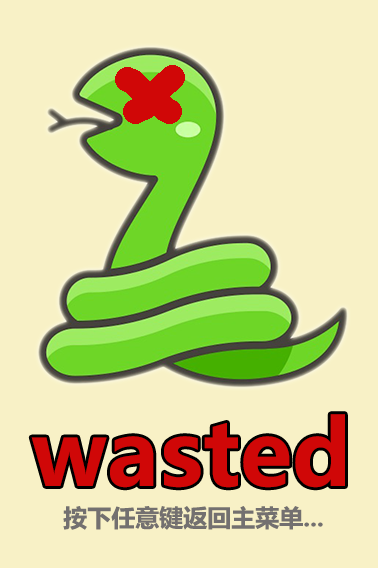
<style>
.page{position:relative;width:378px;height:568px;background:#f8f1c6}
.page>*{position:absolute;margin:0}
.t1{font:89.3px "MicrosoftYaHei-Bold";color:#d00707}
.t2{font:32px "MicrosoftYaHei-Bold";color:#d00707}
.t3{font:24px "MicrosoftYaHei-Bold";color:#737070}
</style>
<div class="page">
<p class="t1" style="left:31px;top:414px;width:314px;height:74px;text-align:center">wasted<span class="t2"><br>s</span></p>
<p class="t3" style="left:63px;top:506px;width:260px;height:24px">按下任意键返回主菜单...</p>
</div>
